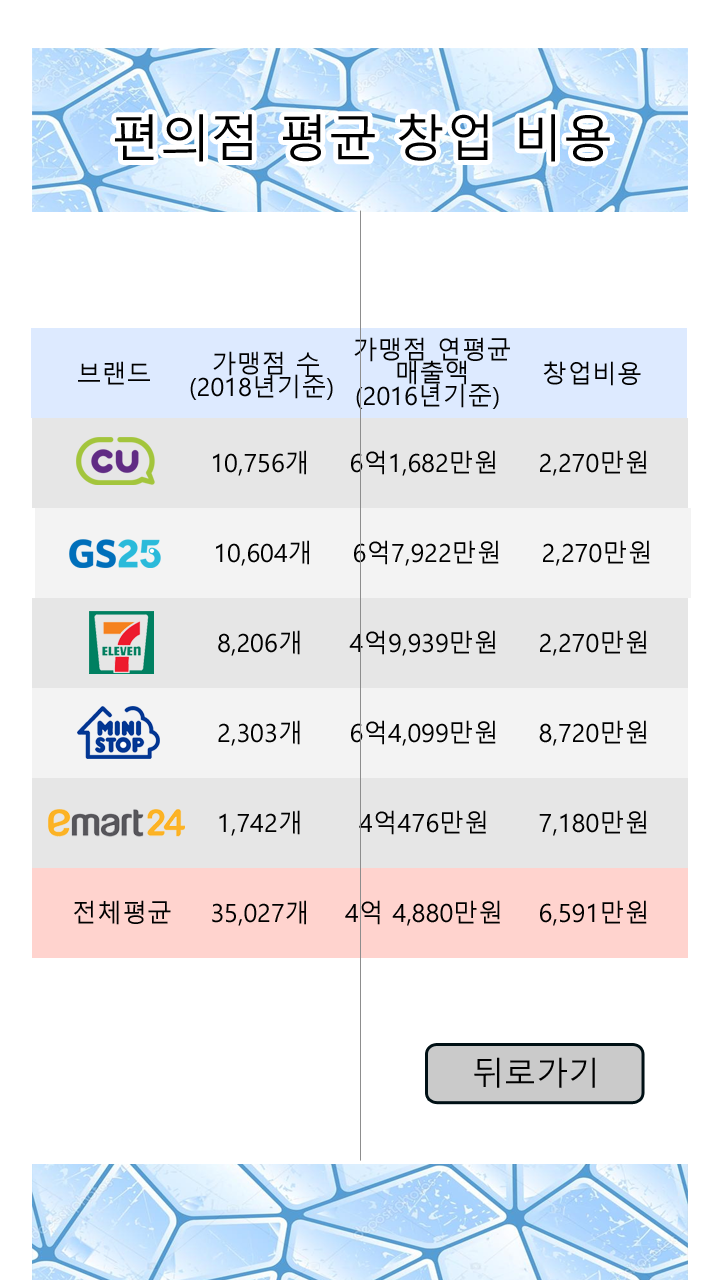
<style>
.page{position:relative;width:720px;height:1280px;background:#ffffff}
.page>*{position:absolute;margin:0}
.t1{font:50px "MalgunGothic";color:#000000}
.t2{font:25px/23px "MalgunGothic";color:#000000}
.t3{font:25px "MalgunGothic";color:#000000}
.t4{font:32px "MalgunGothic";color:#000000}
</style>
<div class="page">
<p class="t1" style="left:115px;top:113px;width:495px;height:49px">편의점 평균 창업 비용</p>
<p class="t2" style="left:354px;top:337px;width:156px;height:72px;text-align:center">가맹점 연평균<br>매출액<br>(2016년기준)</p>
<p class="t2" style="left:190px;top:351px;width:143px;height:49px;text-align:center">가맹점 수<br>(2018년기준)</p>
<p class="t3" style="left:78px;top:361px;width:72px;height:24px">브랜드</p>
<p class="t3" style="left:543px;top:361px;width:98px;height:25px">창업비용</p>
<p class="t3" style="left:213px;top:450px;width:93px;height:26px">10,756개</p>
<p class="t3" style="left:351px;top:450px;width:145px;height:26px">6억1,682만원</p>
<p class="t3" style="left:540px;top:450px;width:107px;height:26px">2,270만원</p>
<p class="t3" style="left:216px;top:540px;width:93px;height:26px">10,604개</p>
<p class="t3" style="left:354px;top:540px;width:145px;height:26px">6억7,922만원</p>
<p class="t3" style="left:543px;top:540px;width:107px;height:26px">2,270만원</p>
<p class="t3" style="left:218px;top:630px;width:82px;height:26px">8,206개</p>
<p class="t3" style="left:349px;top:630px;width:147px;height:26px">4억9,939만원</p>
<p class="t3" style="left:540px;top:630px;width:107px;height:26px">2,270만원</p>
<p class="t3" style="left:218px;top:720px;width:82px;height:26px">2,303개</p>
<p class="t3" style="left:351px;top:720px;width:145px;height:26px">6억1,682만원</p>
<p class="t3" style="left:351px;top:720px;width:145px;height:26px">6억4,099만원</p>
<p class="t3" style="left:539px;top:720px;width:108px;height:26px">8,720만원</p>
<p class="t3" style="left:219px;top:810px;width:81px;height:26px">1,742개</p>
<p class="t3" style="left:359px;top:810px;width:127px;height:25px">4억476만원</p>
<p class="t3" style="left:539px;top:810px;width:108px;height:26px">7,180만원</p>
<p class="t3" style="left:74px;top:900px;width:97px;height:25px">전체평균</p>
<p class="t3" style="left:212px;top:900px;width:94px;height:26px">35,027개</p>
<p class="t3" style="left:345px;top:900px;width:155px;height:26px">4억 4,880만원</p>
<p class="t3" style="left:540px;top:900px;width:107px;height:26px">6,591만원</p>
<p class="t4" style="left:474px;top:1057px;width:121px;height:31px">뒤로가기</p>
</div>
